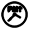
<style>
.page{position:relative;width:29px;height:29px;background:#ffffff}
.page>*{position:absolute;margin:0}
.t1{font:6.9px "ArialRoundedMTBold";color:#000000}
</style>
<div class="page">
<p class="t1" style="left:8px;top:6px;width:14px;height:6px">PM?</p>
</div>
